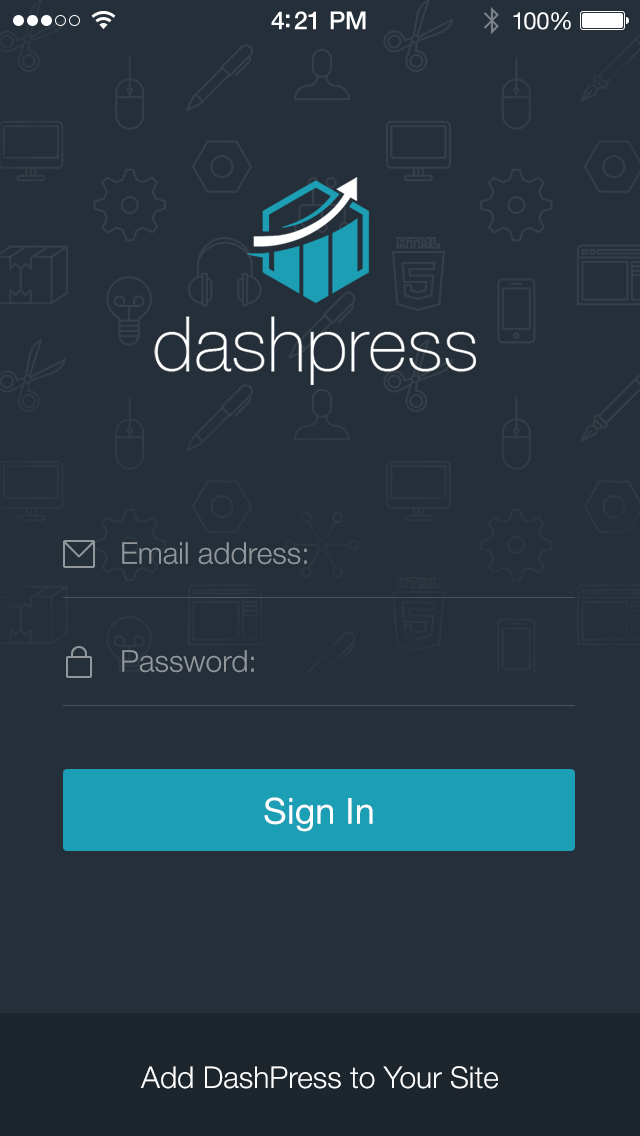
<style>
.page{position:relative;width:640px;height:1136px;background:#252f39}
.page>*{position:absolute;margin:0}
.t1{font:25px "HelveticaNeue-Medium";letter-spacing:-0.02em;color:#ffffff}
.t2{font:24px "HelveticaNeue";letter-spacing:-0.02em;color:#ffffff}
.t3{font:30px "HelveticaNeue-Light";color:#92979c}
.t4{font:36px "HelveticaNeue";color:#ffffff}
.t5{font:30px "HelveticaNeue-Light";color:#ffffff}
</style>
<div class="page">
<p class="t1" style="left:271px;top:11px;width:95px;height:19px">4:21 PM</p>
<p class="t2" style="left:513px;top:11px;width:58px;height:19px">100%</p>
<p class="t3" style="left:122px;top:542px;width:185px;height:23px">Email address:</p>
<p class="t3" style="left:122px;top:650px;width:132px;height:23px">Password:</p>
<p class="t4" style="left:264px;top:797px;width:109px;height:35px">Sign In</p>
<p class="t5" style="left:140px;top:1066px;width:358px;height:23px">Add DashPress to Your Site</p>
</div>
